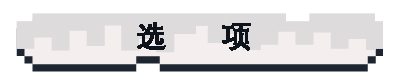
<style>
.page{position:relative;width:400px;height:82px;background:#ffffff}
.page>*{position:absolute;margin:0}
.t1{font:30px "DengXian-Bold";color:#0f131c;font-weight:bold}
</style>
<div class="page">
<p class="t1" style="left:137px;top:22px;width:114px;height:29px">选      项</p>
</div>
